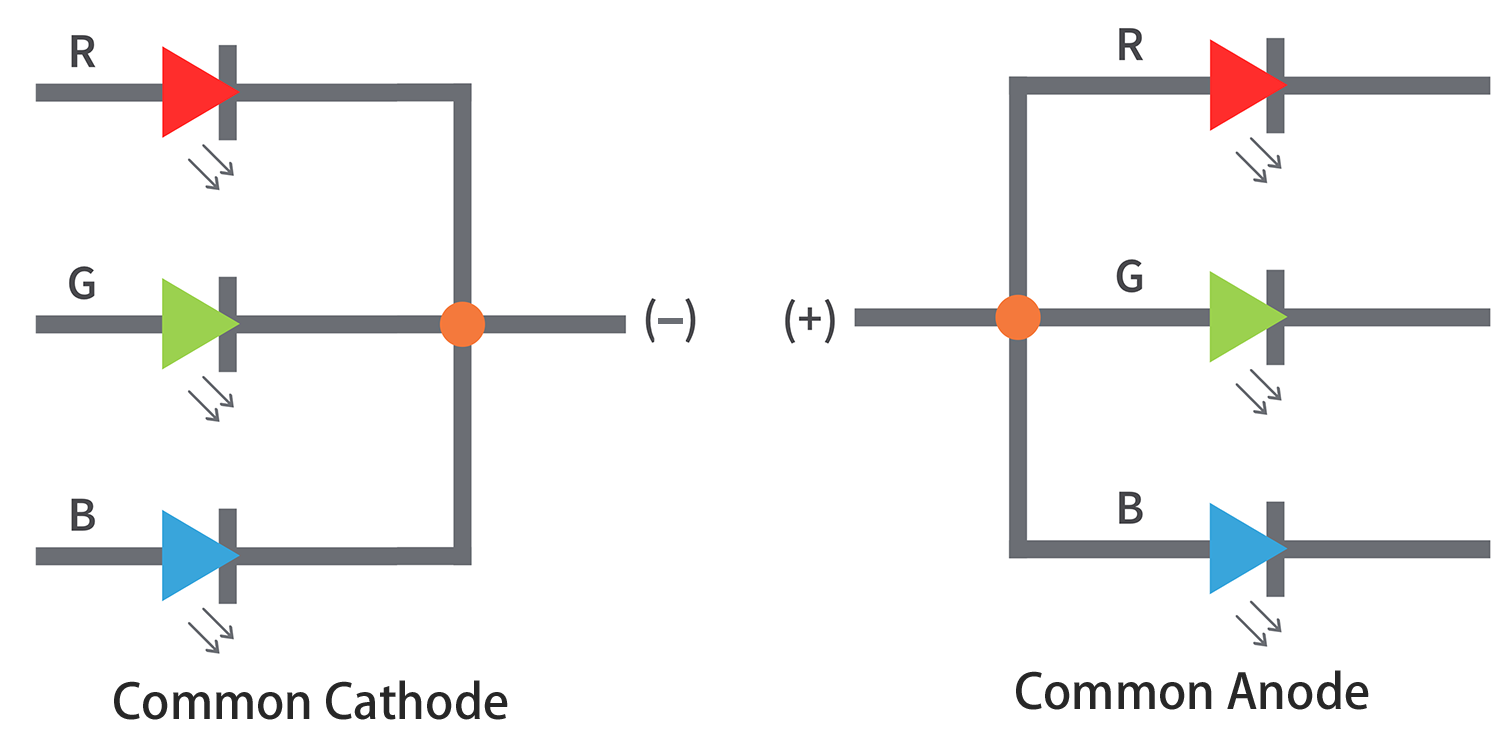
<style>
.page{position:relative;width:1500px;height:751px;background:#ffffff}
.page>*{position:absolute;margin:0}
.t1{font:48px "AdobeHeitiStd-Regular";color:#272727}
</style>
<div class="page">
<p class="t1" style="left:1016px;top:670px;width:353px;height:40px">Common Anode</p>
<p class="t1" style="left:114px;top:680px;width:394px;height:40px">Common Cathode</p>
</div>
